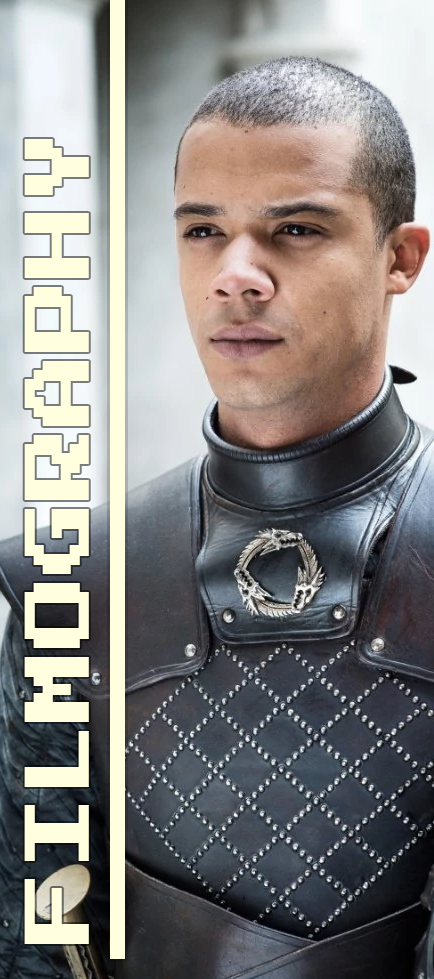
<style>
.page{position:relative;width:434px;height:979px}
.page>*{position:absolute;margin:0}
.t1{font:72px "PressStart2P-Regular";color:#ffffe0;font-weight:bold}
</style>
<div class="page">
<p class="t1" style="left:24px;top:139px;width:65px;height:805px;rotate:-90deg">FILMOGRAPHY</p>
</div>
